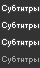
<style>
.page{position:relative;width:40px;height:68px;background:#333333}
.page>*{position:absolute;margin:0}
.t1{font:8px "Small Fonts";letter-spacing:0.005em;color:#ffffff}
.t2{font:8px "Small Fonts";letter-spacing:0.005em;color:#a7a7a7}
</style>
<div class="page">
<p class="t1" style="left:2px;top:5px;width:37px;height:8px">Субтитры</p>
<p class="t1" style="left:2px;top:22px;width:37px;height:8px">Субтитры</p>
<p class="t1" style="left:2px;top:39px;width:37px;height:8px">Субтитры</p>
<p class="t2" style="left:2px;top:56px;width:37px;height:8px">Субтитры</p>
</div>
